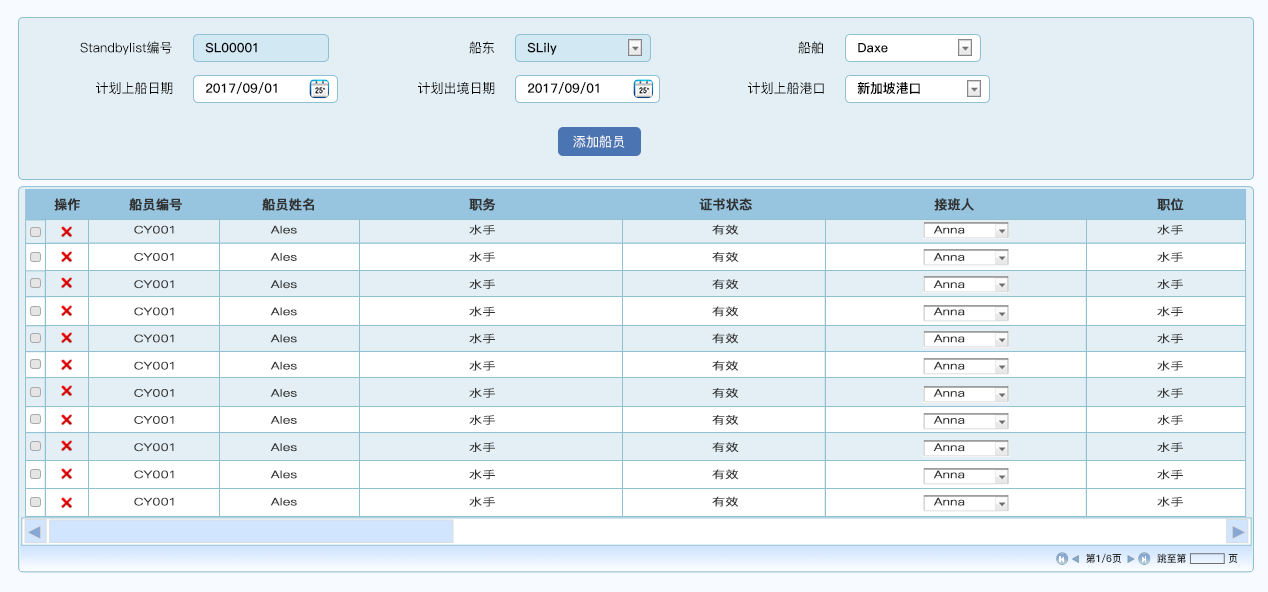
<style>
.page{position:relative;width:1268px;height:592px;background:#e3eff4}
.page>*{position:absolute;margin:0}
.t1{font:13.2px "PingFang-SC-Medium";color:#050505}
.t2{font:13px "PingFang-SC-Heavy";color:#050505}
.t3{font:13.2px "PingFang-SC-Medium";color:#ffffff}
.t4{font:13px "PingFang-SC-Bold";color:#323232;font-weight:bold}
.t5{font:10.4px/13.6px "PingFang-SC-Regular";color:#323232;font-weight:bold;scale:1.26 1}
.t6{font:10px "PingFang-SC-Heavy";color:#2d2e2e}
</style>
<div class="page">
<p class="t1" style="left:80px;top:41px;width:92px;height:14px">Standbylist编号</p>
<p class="t1" style="left:469px;top:41px;width:26px;height:13px">船东</p>
<p class="t1" style="left:798px;top:41px;width:25px;height:13px">船舶</p>
<p class="t2" style="left:205px;top:42px;width:52px;height:11px">SL00001</p>
<p class="t2" style="left:527px;top:42px;width:30px;height:13px">SLily</p>
<p class="t2" style="left:858px;top:43px;width:30px;height:10px">Daxe</p>
<p class="t1" style="left:96px;top:81px;width:77px;height:13px">计划上船日期</p>
<p class="t2" style="left:206px;top:82px;width:71px;height:12px">2017/09/01</p>
<p class="t1" style="left:418px;top:82px;width:77px;height:12px">计划出境日期</p>
<p class="t2" style="left:528px;top:82px;width:71px;height:12px">2017/09/01</p>
<p class="t1" style="left:748px;top:81px;width:76px;height:13px">计划上船港口</p>
<p class="t2" style="left:857px;top:82px;width:63px;height:13px">新加坡港口</p>
<p class="t3" style="left:573px;top:135px;width:52px;height:13px">添加船员</p>
<p class="t4" style="left:54px;top:198px;width:26px;height:13px">操作</p>
<p class="t4" style="left:129px;top:198px;width:53px;height:13px">船员编号</p>
<p class="t4" style="left:262px;top:198px;width:52px;height:13px">船员姓名</p>
<p class="t4" style="left:469px;top:198px;width:27px;height:13px">职务</p>
<p class="t4" style="left:699px;top:198px;width:53px;height:13px">证书状态</p>
<p class="t4" style="left:934px;top:198px;width:40px;height:13px">接班人</p>
<p class="t4" style="left:1157px;top:198px;width:27px;height:13px">职位</p>
<p class="t5" style="left:134px;top:225px;width:40px;height:281px">CY001<br><br>CY001<br><br>CY001<br><br>CY001<br><br>CY001<br><br>CY001<br><br>CY001<br><br>CY001<br><br>CY001<br><br>CY001<br><br>CY001</p>
<p class="t5" style="left:270px;top:225px;width:27px;height:281px">Ales<br><br>Ales<br><br>Ales<br><br>Ales<br><br>Ales<br><br>Ales<br><br>Ales<br><br>Ales<br><br>Ales<br><br>Ales<br><br>Ales</p>
<p class="t5" style="left:469px;top:224px;width:26px;height:283px">水手<br><br>水手<br><br>水手<br><br>水手<br><br>水手<br><br>水手<br><br>水手<br><br>水手<br><br>水手<br><br>水手<br><br>水手</p>
<p class="t5" style="left:712px;top:224px;width:27px;height:283px">有效<br><br>有效<br><br>有效<br><br>有效<br><br>有效<br><br>有效<br><br>有效<br><br>有效<br><br>有效<br><br>有效<br><br>有效</p>
<p class="t5" style="left:933px;top:225px;width:32px;height:281px">Anna<br><br>Anna<br><br>Anna<br><br>Anna<br><br>Anna<br><br>Anna<br><br>Anna<br><br>Anna<br><br>Anna<br><br>Anna<br><br>Anna</p>
<p class="t5" style="left:1157px;top:224px;width:26px;height:283px">水手<br><br>水手<br><br>水手<br><br>水手<br><br>水手<br><br>水手<br><br>水手<br><br>水手<br><br>水手<br><br>水手<br><br>水手</p>
<p class="t6" style="left:1086px;top:553px;width:36px;height:10px">第1/6页</p>
<p class="t6" style="left:1157px;top:553px;width:81px;height:10px">跳至第             页</p>
</div>
